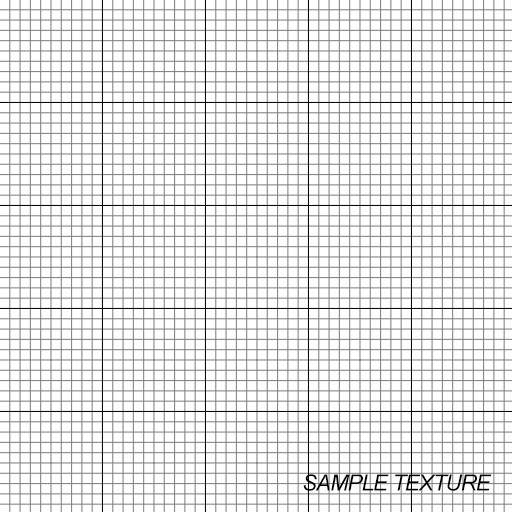
<style>
.page{position:relative;width:512px;height:512px;background:#ffffff}
.page>*{position:absolute;margin:0}
.t1{font:22.2px "Arial-ItalicMT";letter-spacing:-0.04em;color:#000000}
</style>
<div class="page">
<p class="t1" style="left:303px;top:474px;width:189px;height:17px">SAMPLE TEXTURE</p>
</div>
